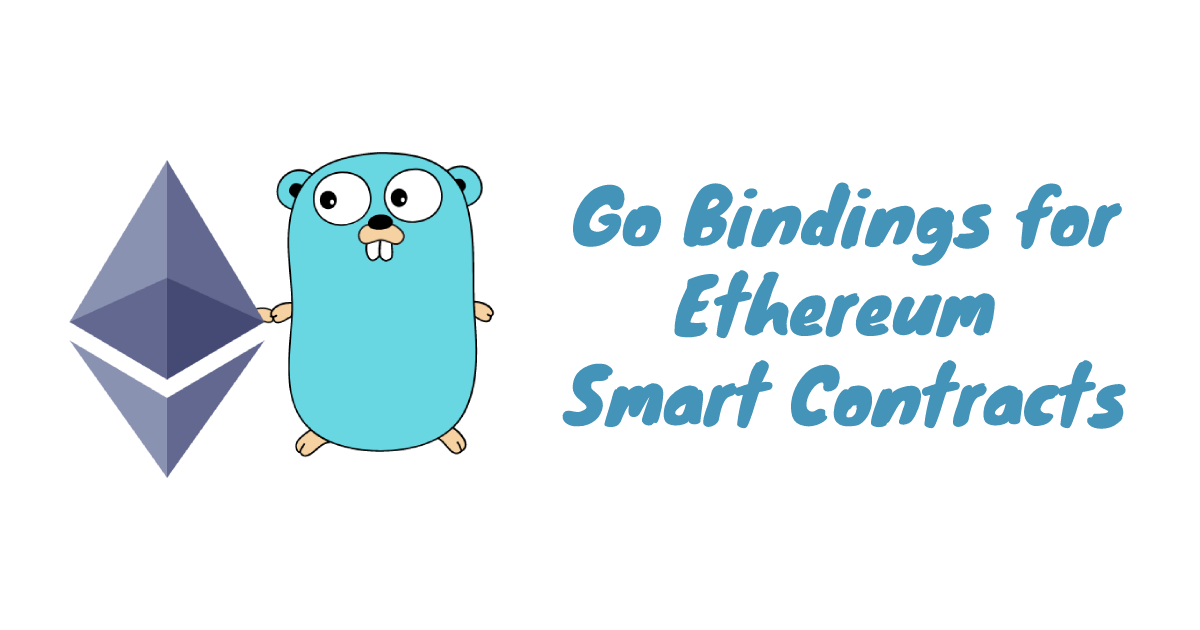
<style>
.page{position:relative;width:1200px;height:630px;background:#ffffff}
.page>*{position:absolute;margin:0}
.t1{font:75px "Knewave-Regular";color:#4493b8}
</style>
<div class="page">
<p class="t1" style="left:562px;top:181px;width:564px;height:248px;text-align:center">Go Bindings for<br>Ethereum <br>Smart Contracts</p>
</div>
